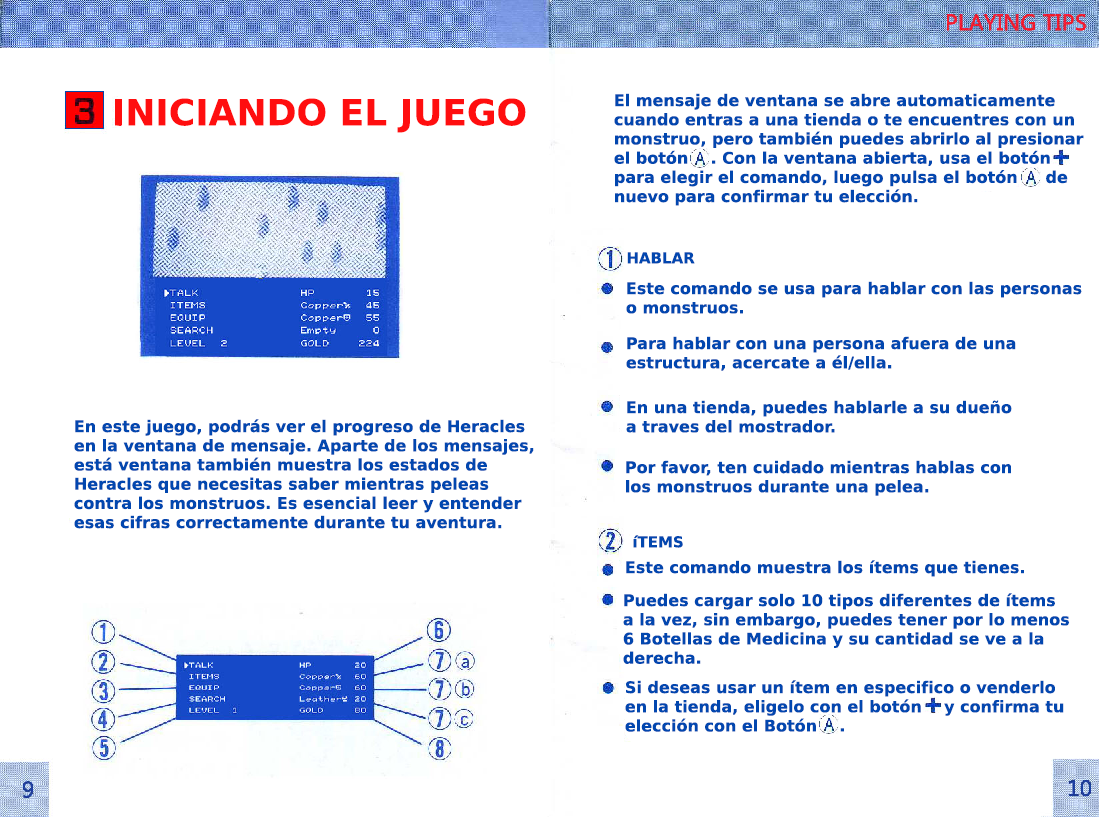
<style>
.page{position:relative;width:1099px;height:817px;background:#ffffff}
.page>*{position:absolute;margin:0}
.t1{font:36px "PrimaSansBT-Bold";color:#ff0e0f}
.t2{font:16px "PrimaSansBT-Bold";color:#0247af}
.t3{font:15px "PrimaSansBT-Bold";color:#0247af}
</style>
<div class="page">
<p class="t1" style="left:115px;top:98px;width:411px;height:35px">INICIANDO EL JUEGO</p>
<p class="t2" style="left:614px;top:93px;width:470px;height:113px">El mensaje de ventana se abre automaticamente<br>cuando entras a una tienda o te encuentres con un<br>monstruo, pero también puedes abrirlo al presionar el botón    . Con la ventana abierta, usa el botón<br>para elegir el comando, luego pulsa el botón     de<br>nuevo para confirmar tu elección.</p>
<p class="t3" style="left:627px;top:252px;width:68px;height:12px">HABLAR</p>
<p class="t2" style="left:626px;top:281px;width:456px;height:33px">Este comando se usa para hablar con las personas<br>o monstruos.</p>
<p class="t2" style="left:626px;top:336px;width:390px;height:35px">Para hablar con una persona afuera de una<br>estructura, acercate a él/ella.</p>
<p class="t2" style="left:626px;top:400px;width:386px;height:33px">En una tienda, puedes hablarle a su dueño<br>a traves del mostrador.</p>
<p class="t2" style="left:74px;top:419px;width:460px;height:110px">En este juego, podrás ver el progreso de Heracles<br>en la ventana de mensaje. Aparte de los mensajes,<br>está ventana también muestra los estados de<br>Heracles que necesitas saber mientras peleas<br>contra los monstruos. Es esencial leer y entender<br>esas cifras correctamente durante tu aventura.</p>
<p class="t2" style="left:626px;top:460px;width:385px;height:36px">Por favor, ten cuidado mientras hablas con<br>los monstruos durante una pelea.</p>
<p class="t3" style="left:633px;top:535px;width:50px;height:13px">íTEMS</p>
<p class="t2" style="left:626px;top:560px;width:398px;height:17px">Este comando muestra los ítems que tienes.</p>
<p class="t2" style="left:623px;top:593px;width:447px;height:71px">Puedes cargar solo 10 tipos diferentes de ítems<br>a la vez, sin embargo, puedes tener por lo menos<br>6 Botellas de Medicina y su cantidad se ve a la<br>derecha.</p>
<p class="t2" style="left:625px;top:680px;width:439px;height:52px">Si deseas usar un ítem en especifico o venderlo<br>en la tienda, eligelo con el botón    y confirma tu<br>elección con el Botón    .</p>
</div>
